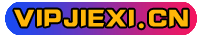
<style>
.page{position:relative;width:200px;height:40px;background:#ffffff}
.page>*{position:absolute;margin:0}
.t1{font:25px "JLinXin";color:#ffb608}
</style>
<div class="page">
<p class="t1" style="left:14px;top:9px;width:174px;height:20px">VIPJIEXI.CN</p>
</div>
